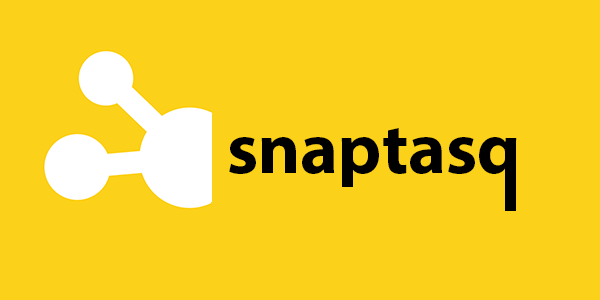
<style>
.page{position:relative;width:600px;height:300px;background:#fcd11a}
.page>*{position:absolute;margin:0}
.t1{font:72px "MyriadPro-Bold";color:#000000}
</style>
<div class="page">
<p class="t1" style="left:229px;top:128px;width:288px;height:59px">snaptasq</p>
</div>
